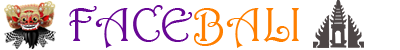
<style>
.page{position:relative;width:400px;height:50px;background:#ffffff}
.page>*{position:absolute;margin:0}
.t1{font:48px "Harrington";color:#680795}
.t2{font:48px "Harrington";color:#ff7f00}
</style>
<div class="page">
<p class="t1" style="left:69px;top:5px;width:230px;height:43px">FACE<span class="t2">BALI</span></p>
</div>
